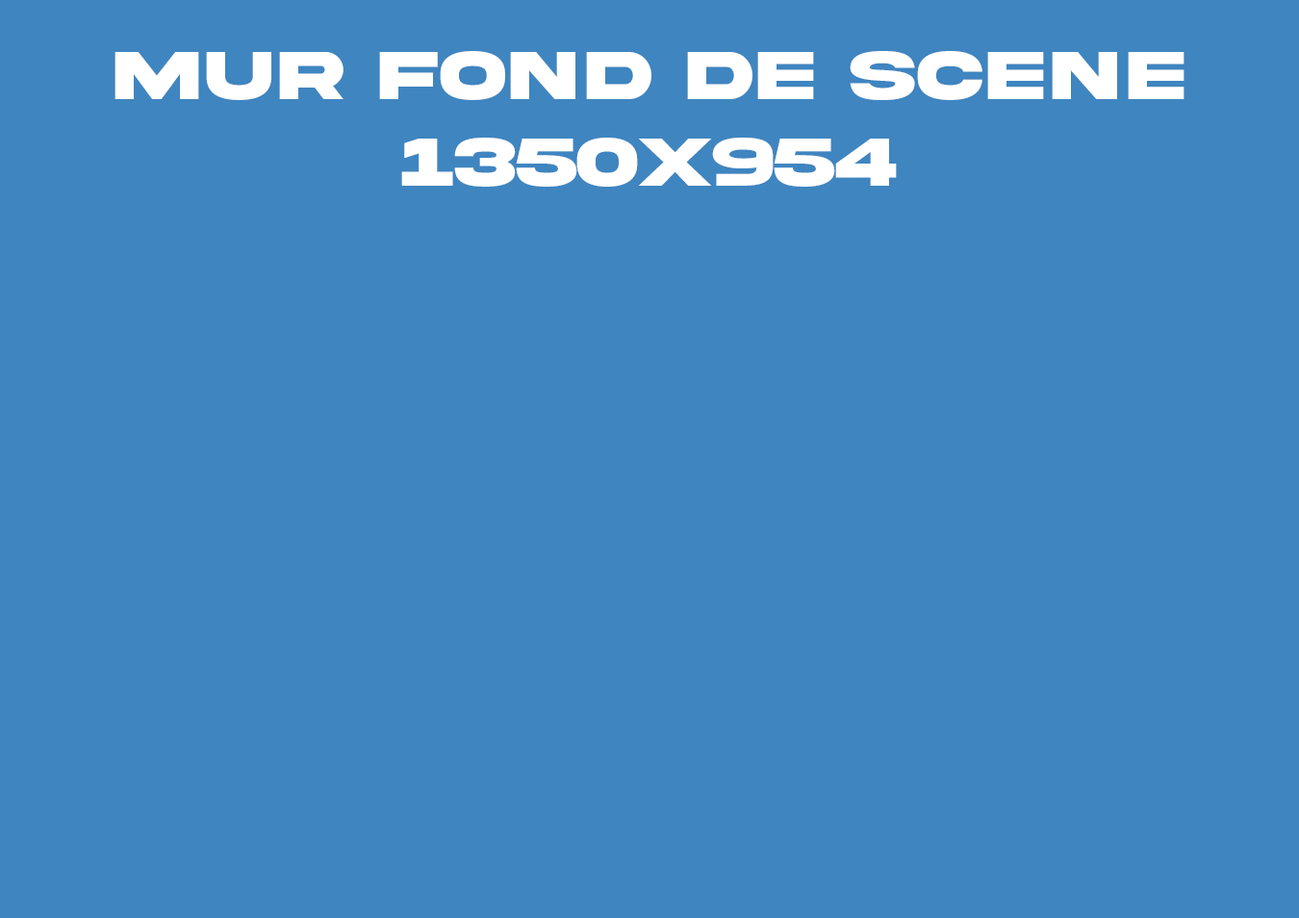
<style>
.page{position:relative;width:1299px;height:918px;background:#3f85c0}
.page>*{position:absolute;margin:0}
.t1{font:72.2px "AkiraExpanded-SuperBold";color:#ffffff}
</style>
<div class="page">
<p class="t1" style="left:115px;top:51px;width:1069px;height:136px;text-align:center">mur fond de scene<br>1350x954</p>
</div>
